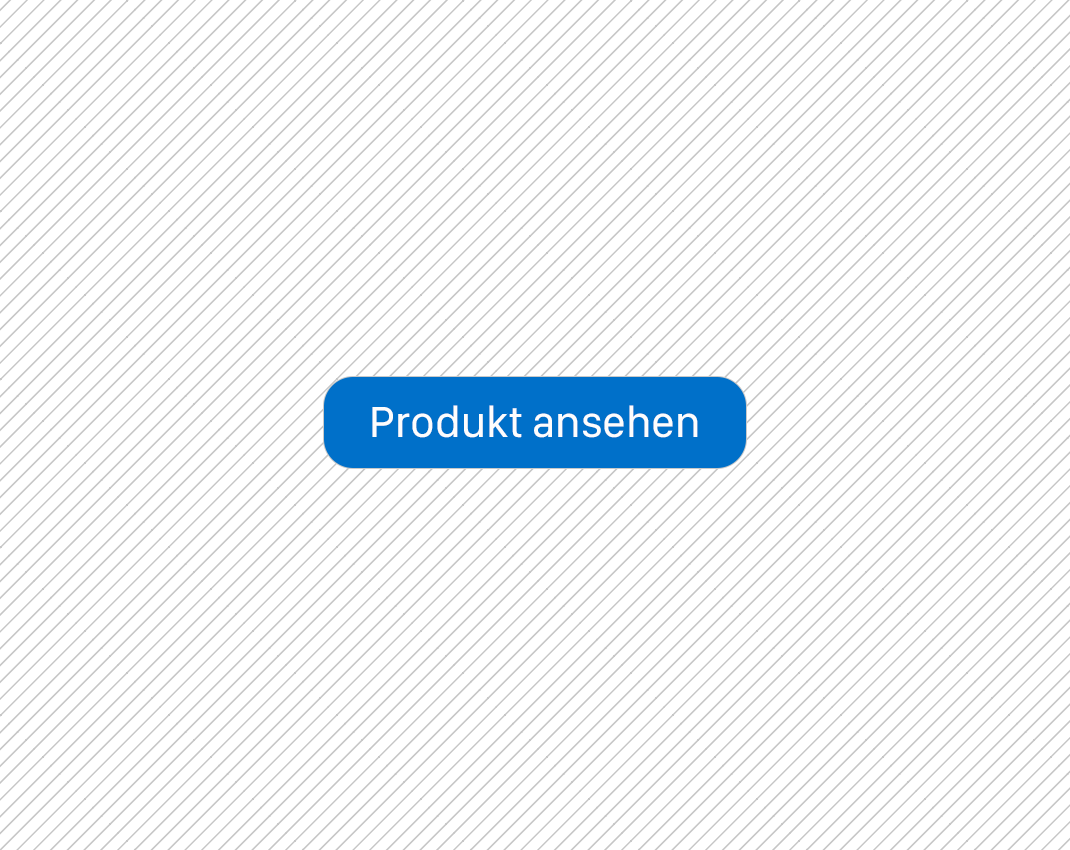
<style>
.page{position:relative;width:1070px;height:850px;background:#ffffff}
.page>*{position:absolute;margin:0}
.t1{font:45px "SFCompactDisplay-Regular";color:#fdfdfd}
</style>
<div class="page">
<p class="t1" style="left:372px;top:405px;width:326px;height:33px">Produkt ansehen</p>
</div>
